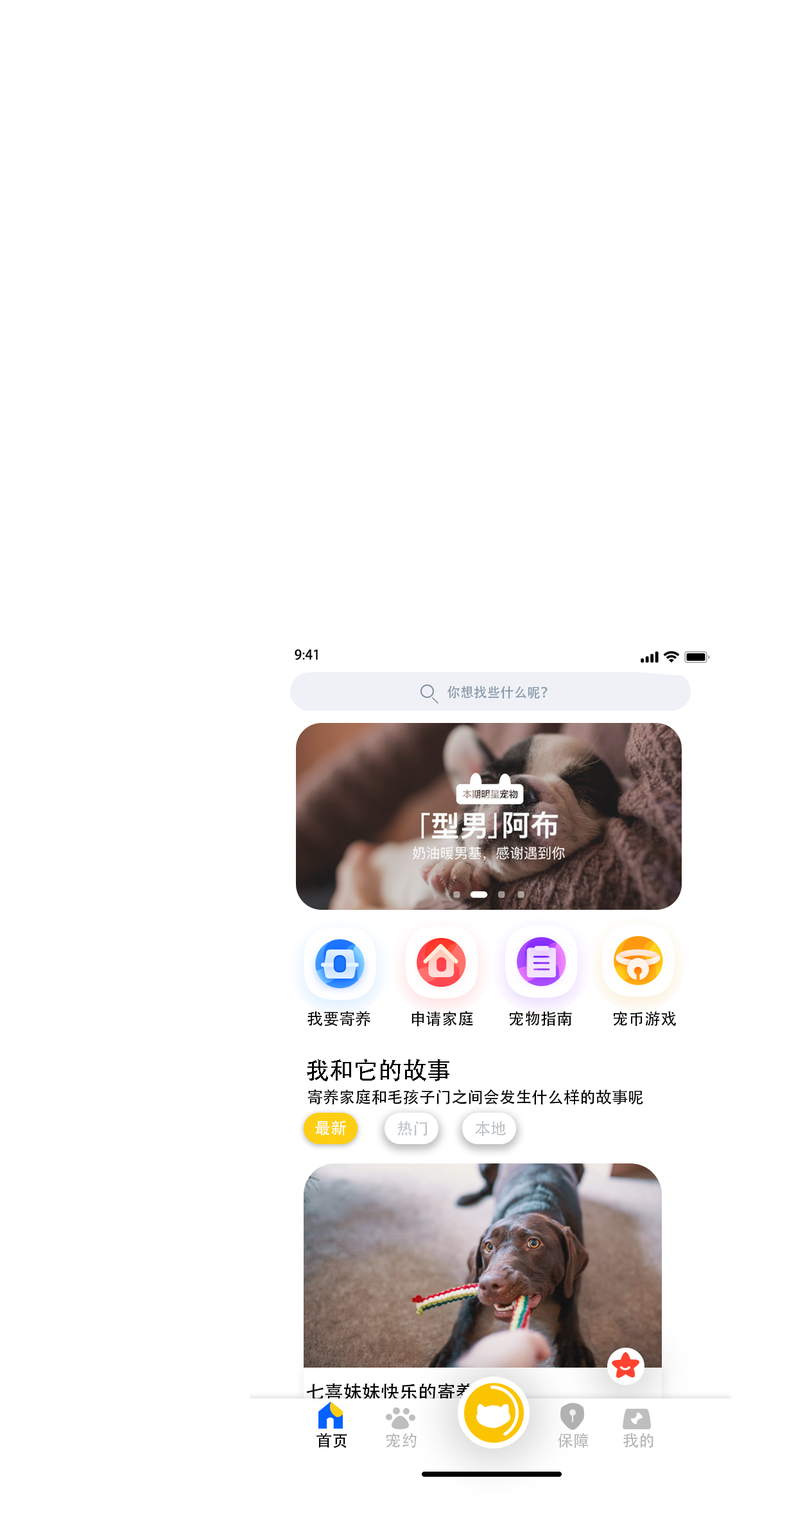
<style>
.page{position:relative;width:787px;height:1514px;background:#ffffff}
.page>*{position:absolute;margin:0}
.t1{font:13.4px "AdobeHeitiStd-Regular";color:#000000}
.t2{font:13.4px "AdobeHeitiStd-Regular";color:#8c9baa}
.t3{font:16.1px "AdobeHeitiStd-Regular";color:#000000}
.t4{font:24.1px "AdobeHeitiStd-Regular";color:#000000}
.t5{font:16.1px "AdobeHeitiStd-Regular";color:#fefefe}
.t6{font:16.1px "AdobeHeitiStd-Regular";color:#bfc4c8}
.t7{font:18.7px "AdobeHeitiStd-Regular";color:#000000}
.t8{font:16.1px "AdobeHeitiStd-Regular";color:#b6b6b6}
</style>
<div class="page">
<p class="t1" style="left:295px;top:649px;width:23px;height:11px">9:41</p>
<p class="t2" style="left:448px;top:686px;width:100px;height:13px">你想找些什么呢？</p>
<p class="t3" style="left:308px;top:1011px;width:63px;height:16px">我要寄养</p>
<p class="t3" style="left:412px;top:1011px;width:61px;height:16px">申请家庭</p>
<p class="t3" style="left:509px;top:1011px;width:63px;height:15px">宠物指南</p>
<p class="t3" style="left:613px;top:1012px;width:64px;height:14px">宠币游戏</p>
<p class="t4" style="left:307px;top:1059px;width:143px;height:23px">我和它的故事</p>
<p class="t3" style="left:308px;top:1089px;width:336px;height:16px">寄养家庭和毛孩子门之间会发生什么样的故事呢</p>
<p class="t5" style="left:315px;top:1121px;width:31px;height:14px">最新</p>
<p class="t6" style="left:398px;top:1121px;width:30px;height:15px">热门</p>
<p class="t6" style="left:475px;top:1121px;width:31px;height:16px">本地</p>
<p class="t7" style="left:306px;top:1383px;width:168px;height:18px">七喜妹妹快乐的寄养</p>
<p class="t3" style="left:317px;top:1433px;width:30px;height:16px">首页</p>
<p class="t8" style="left:386px;top:1433px;width:31px;height:15px">宠约</p>
<p class="t8" style="left:558px;top:1433px;width:31px;height:15px">保障</p>
<p class="t8" style="left:624px;top:1433px;width:30px;height:15px">我的</p>
</div>
